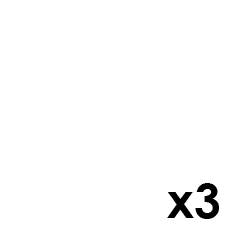
<style>
.page{position:relative;width:225px;height:225px;background:#ffffff}
.page>*{position:absolute;margin:0}
.t1{font:48px "CenturyGothic-Bold";color:#000000}
</style>
<div class="page">
<p class="t1" style="left:167px;top:183px;width:52px;height:36px">x3</p>
</div>
